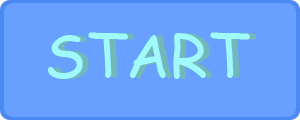
<style>
.page{position:relative;width:300px;height:120px;background:#67a0ff}
.page>*{position:absolute;margin:0}
.t1{font:60px "ComicSansMS";color:#a0f9fa}
.t2{font:60px "ComicSansMS"}
</style>
<div class="page">
<p class="t1" style="left:47px;top:32px;width:203px;height:47px">START</p>
<p class="t2" style="left:53px;top:32px;width:203px;height:47px">START</p>
</div>
